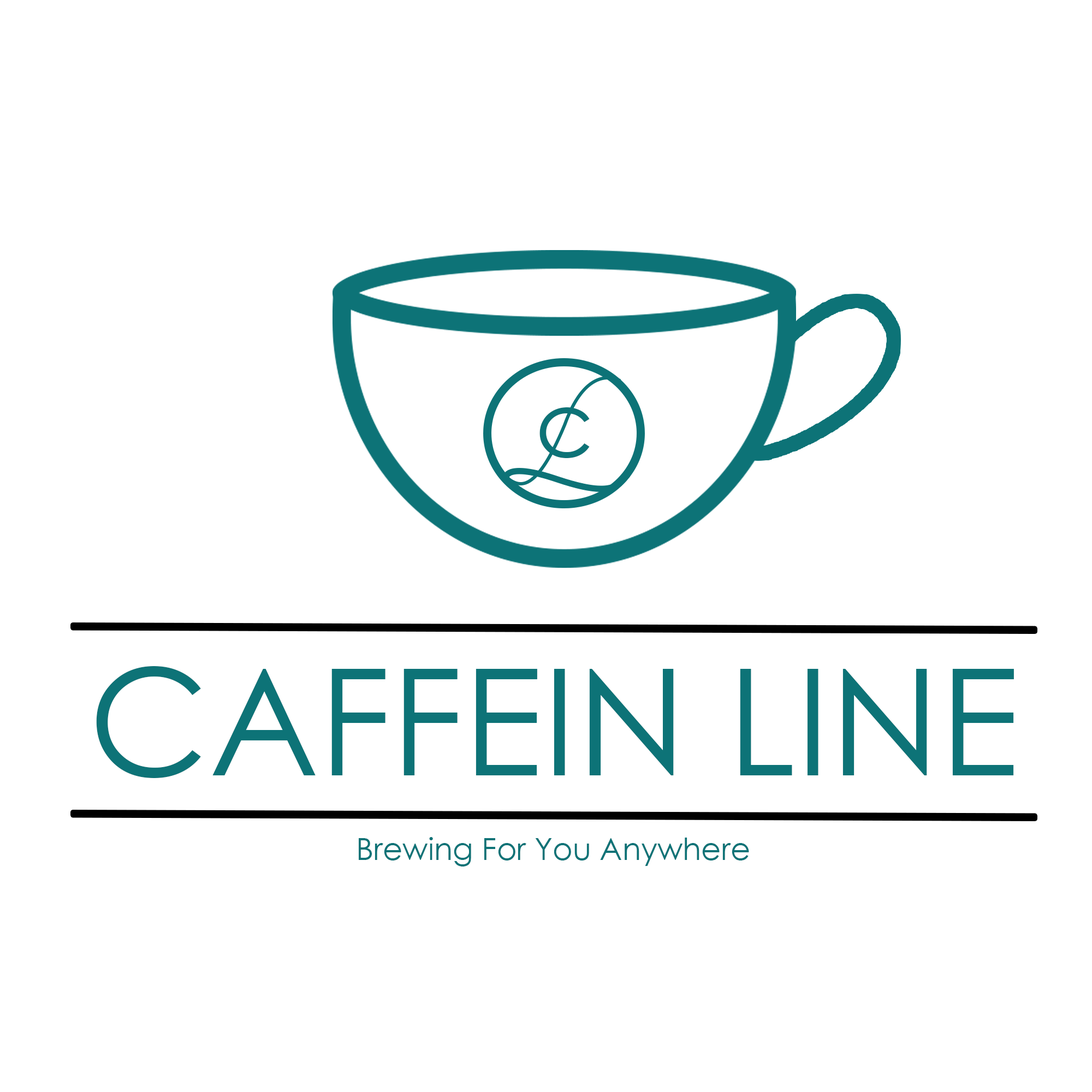
<style>
.page{position:relative;width:1092px;height:1092px;background:#ffffff}
.page>*{position:absolute;margin:0}
.t1{font:91.7px "CenturyGothic";color:#0d7377}
.t2{font:148.6px "CenturyGothic";color:#0d7377}
.t3{font:30.6px "CenturyGothic";color:#0d7377}
</style>
<div class="page">
<p class="t1" style="left:539px;top:407px;width:51px;height:51px">c</p>
<p class="t2" style="left:96px;top:666px;width:918px;height:112px">CAFFEIN LINE</p>
<p class="t3" style="left:359px;top:837px;width:390px;height:29px">Brewing For You Anywhere</p>
</div>
